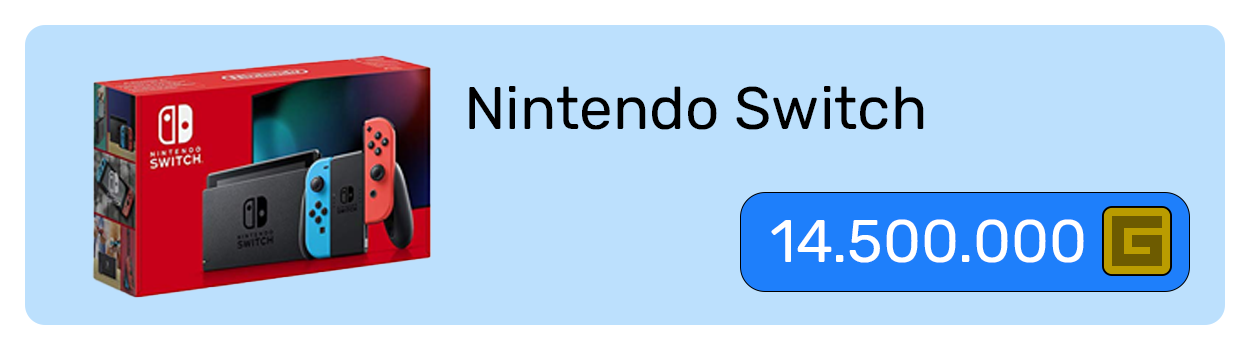
<style>
.page{position:relative;width:1250px;height:350px;background:#bce0fd}
.page>*{position:absolute;margin:0}
.t1{font:60px "Rubik-Regular";color:#000000}
.t2{font:60px "Rubik-Regular";color:#ffffff}
</style>
<div class="page">
<p class="t1" style="left:469px;top:86px;width:455px;height:44px">Nintendo Switch</p>
<p class="t2" style="left:771px;top:219px;width:313px;height:44px">14.500.000</p>
</div>
